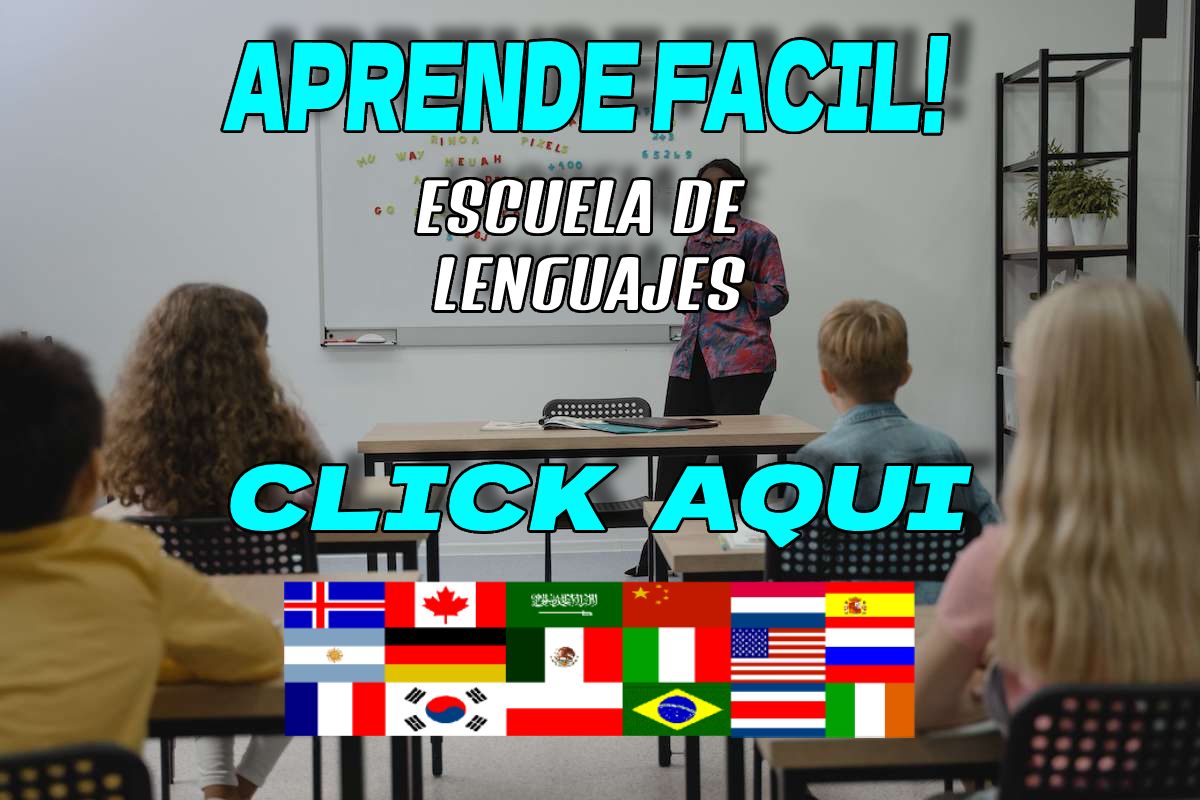
<style>
.page{position:relative;width:1200px;height:800px}
.page>*{position:absolute;margin:0}
.t1{font:120.8px "DelaGothicOne-Regular";color:#03fcff;font-weight:bold;font-style:italic;scale:0.53 1}
.t2{font:64px "DenkOne-Regular";color:#ffffff;font-weight:bold;font-style:italic}
.t3{font:87.9px "DelaGothicOne-Regular";color:#03fcff;font-weight:bold;font-style:italic}
</style>
<div class="page">
<p class="t1" style="left:223px;top:36px;width:726px;height:97px">APRENDE FACIL!</p>
<p class="t2" style="left:417px;top:179px;width:329px;height:132px;text-align:center">ESCUELA DE <br>LENGUAJES</p>
<p class="t3" style="left:228px;top:464px;width:744px;height:84px">CLICK  AQUI</p>
</div>
